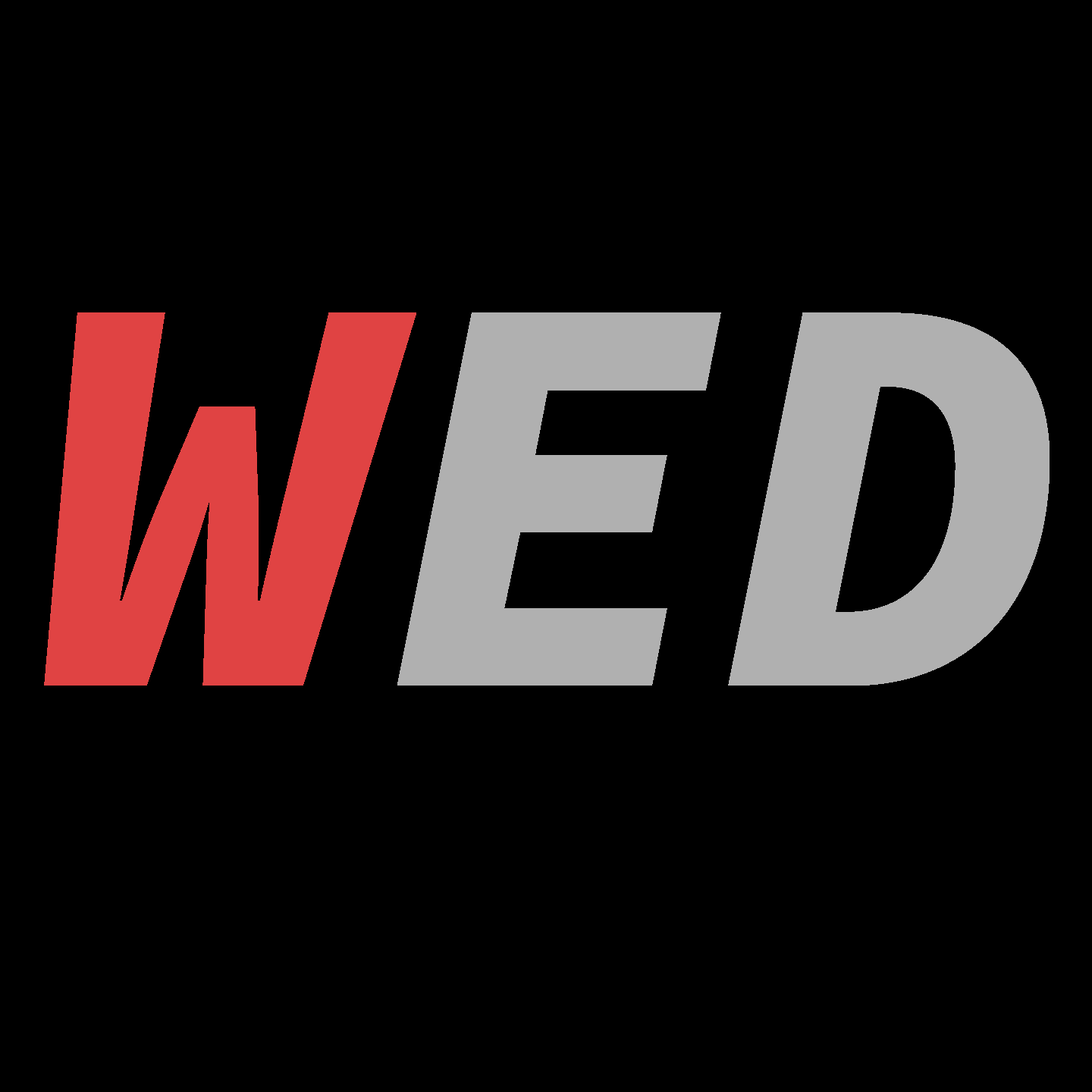
<style>
.page{position:relative;width:1092px;height:1092px;background:#000000}
.page>*{position:absolute;margin:0}
.t1{font:573px "SourceCodeItalic-BlackItalic";color:#b0b0b0}
.t2{font:573px "SourceCodeItalic-BlackItalic";color:#e04343}
</style>
<div class="page">
<p class="t1" style="left:44px;top:312px;width:1006px;height:374px"><span class="t2">W</span>ED</p>
</div>
